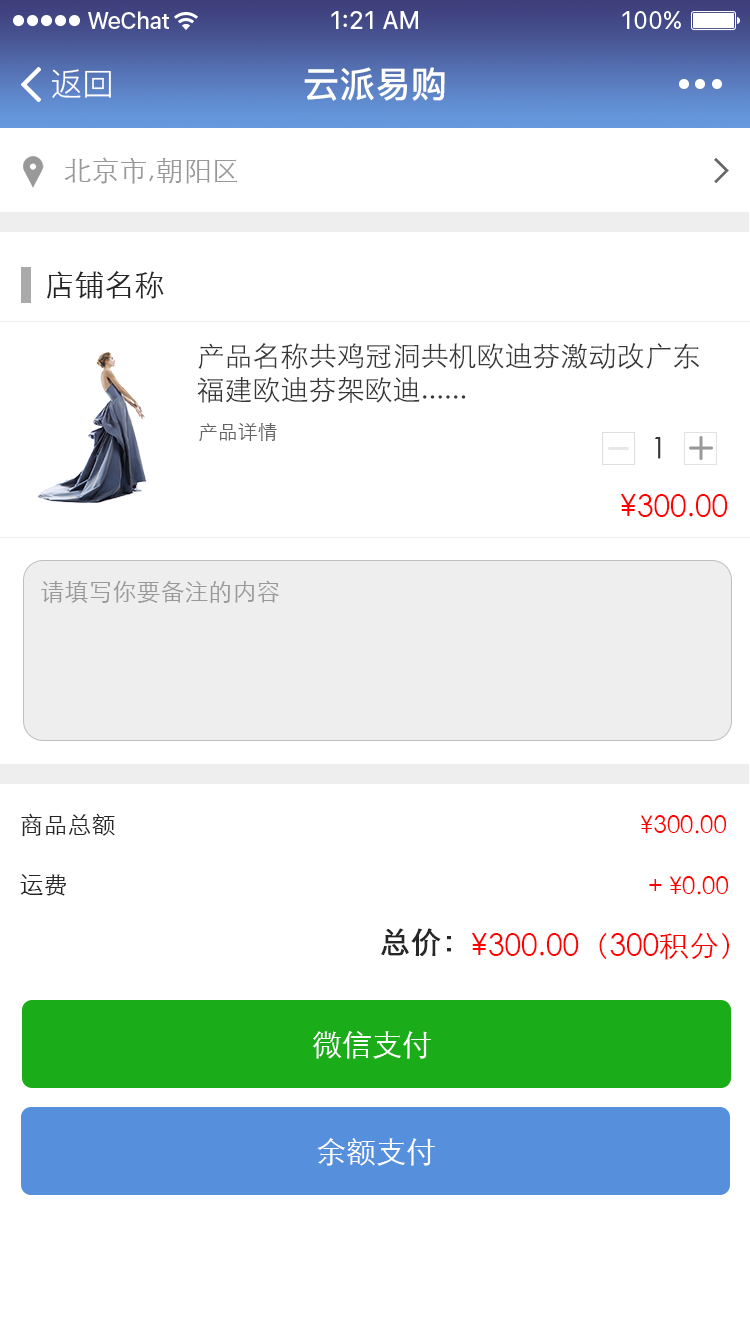
<style>
.page{position:relative;width:750px;height:1334px;background:#ffffff}
.page>*{position:absolute;margin:0}
.t1{font:32px "PingFang-SC-Regular";color:#ffffff}
.t2{font:36px "PingFang-SC-Bold";color:#ffffff}
.t3{font:28px "STXihei";color:#999999}
.t4{font:30px "STXihei";color:#262626}
.t5{font:28px "STXihei";color:#373737}
.t6{font:20px "STXihei";color:#666666}
.t7{font:30px "STXihei";color:#373737}
.t8{font:30px "STXihei";color:#ff0000}
.t9{font:24px "STXihei";color:#999999}
.t10{font:24px "STXihei";color:#262626}
.t11{font:24px "STXihei";color:#ff0000}
.t12{font:30px "STXihei";color:#262626;font-weight:bold}
.t13{font:30px "STXihei";color:#ffffff}
</style>
<div class="page">
<p class="t1" style="left:52px;top:69px;width:59px;height:29px">返回</p>
<p class="t2" style="left:304px;top:67px;width:141px;height:34px">云派易购</p>
<p class="t3" style="left:64px;top:157px;width:173px;height:27px">北京市,朝阳区</p>
<p class="t4" style="left:46px;top:271px;width:118px;height:28px">店铺名称</p>
<p class="t5" style="left:197px;top:343px;width:502px;height:60px">产品名称共鸡冠洞共机欧迪芬激动改广东福建欧迪芬架欧迪......</p>
<p class="t6" style="left:199px;top:423px;width:78px;height:18px">产品详情</p>
<p class="t7" style="left:654px;top:437px;width:7px;height:22px">1</p>
<p class="t8" style="left:620px;top:494px;width:108px;height:23px">¥300.00</p>
<p class="t9" style="left:41px;top:580px;width:238px;height:23px">请填写你要备注的内容</p>
<p class="t10" style="left:21px;top:813px;width:94px;height:23px">商品总额</p>
<p class="t11" style="left:640px;top:815px;width:87px;height:19px">¥300.00</p>
<p class="t10" style="left:20px;top:874px;width:46px;height:22px">运费</p>
<p class="t11" style="left:649px;top:876px;width:80px;height:19px">+ ¥0.00</p>
<p class="t12" style="left:381px;top:928px;width:70px;height:28px">总价：</p>
<p class="t8" style="left:471px;top:932px;width:258px;height:28px">¥300.00（300积分）</p>
<p class="t13" style="left:312px;top:1031px;width:119px;height:28px">微信支付</p>
<p class="t13" style="left:317px;top:1138px;width:118px;height:28px">余额支付</p>
</div>
